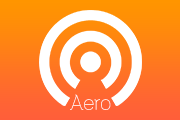
<style>
.page{position:relative;width:180px;height:120px}
.page>*{position:absolute;margin:0}
.t1{font:21.6px "EspacioNovoMedium";color:#ffffff}
</style>
<div class="page">
<p class="t1" style="left:70px;top:94px;width:41px;height:16px">Aero</p>
</div>
